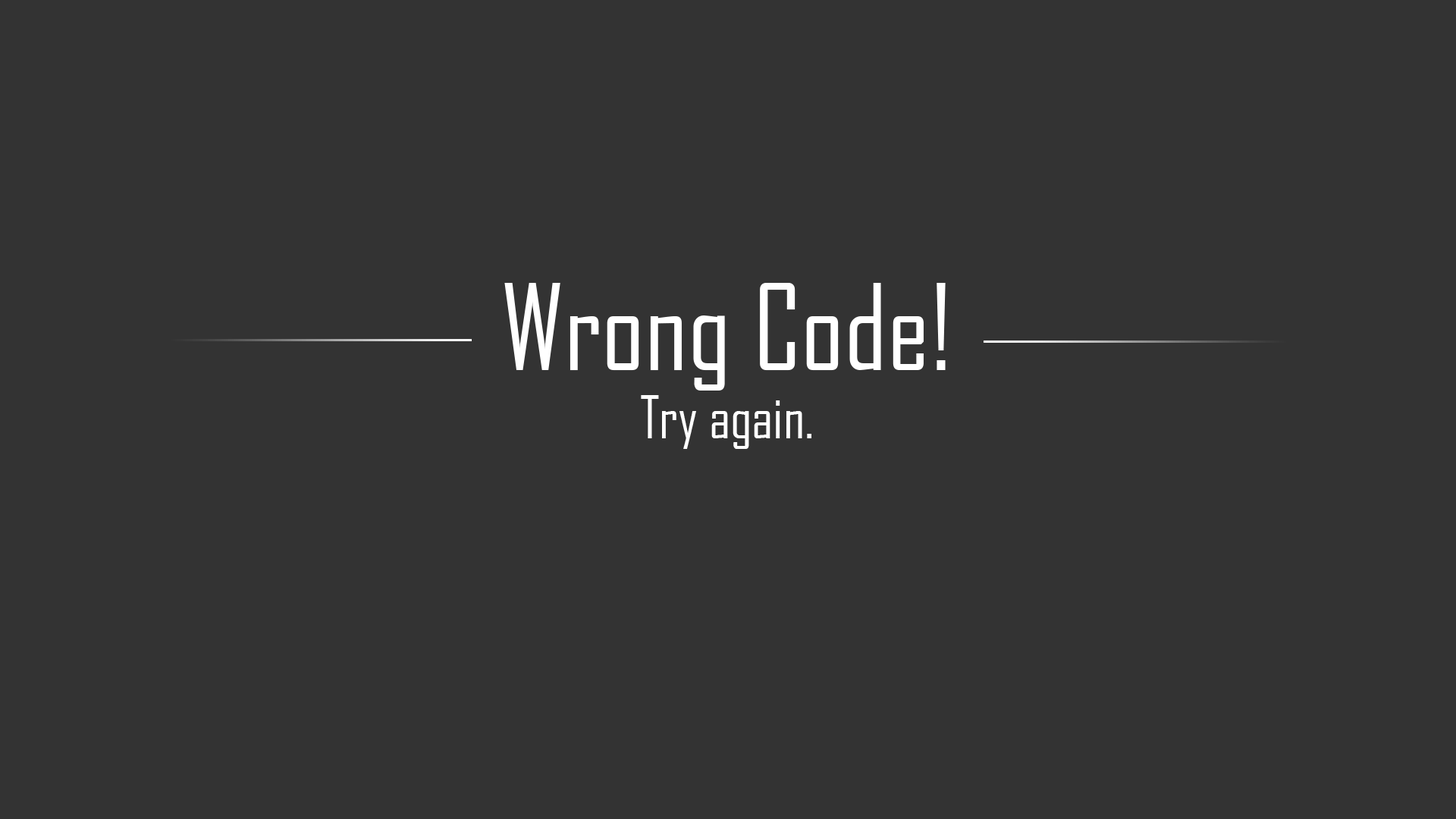
<style>
.page{position:relative;width:1456px;height:819px;background:#333333}
.page>*{position:absolute;margin:0}
.t1{font:113.7px "AgencyFB-Reg";color:#ffffff}
.t2{font:56.9px "AgencyFB-Reg";color:#ffffff}
</style>
<div class="page">
<p class="t1" style="left:504px;top:283px;width:442px;height:166px;text-align:center">Wrong Code!<br><span class="t2">Try again.</span></p>
</div>
